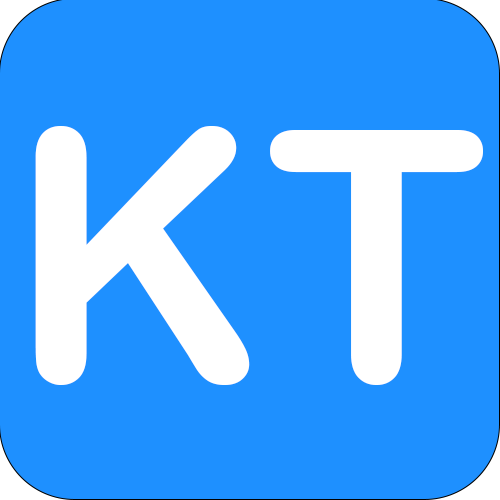
<style>
.page{position:relative;width:500px;height:500px;background:#1e90ff}
.page>*{position:absolute;margin:0}
.t1{font:350px "ArialRoundedMTBold";color:#ffffff}
</style>
<div class="page">
<p class="t1" style="left:35px;top:126px;width:448px;height:259px">KT</p>
</div>
